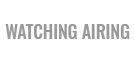
<style>
.page{position:relative;width:134px;height:64px;background:#ffffff}
.page>*{position:absolute;margin:0}
.t1{font:17.6px "Oswald-Medium";color:#999999}
</style>
<div class="page">
<p class="t1" style="left:5px;top:24px;width:125px;height:15px">WATCHING AIRING</p>
</div>
